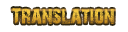
<style>
.page{position:relative;width:128px;height:32px;background:#ffffff}
.page>*{position:absolute;margin:0}
.t1{font:22px "28DaysLater";color:#ecbe3d;scale:0.91 1}
</style>
<div class="page">
<p class="t1" style="left:12px;top:8px;width:102px;height:16px">Translation</p>
</div>
